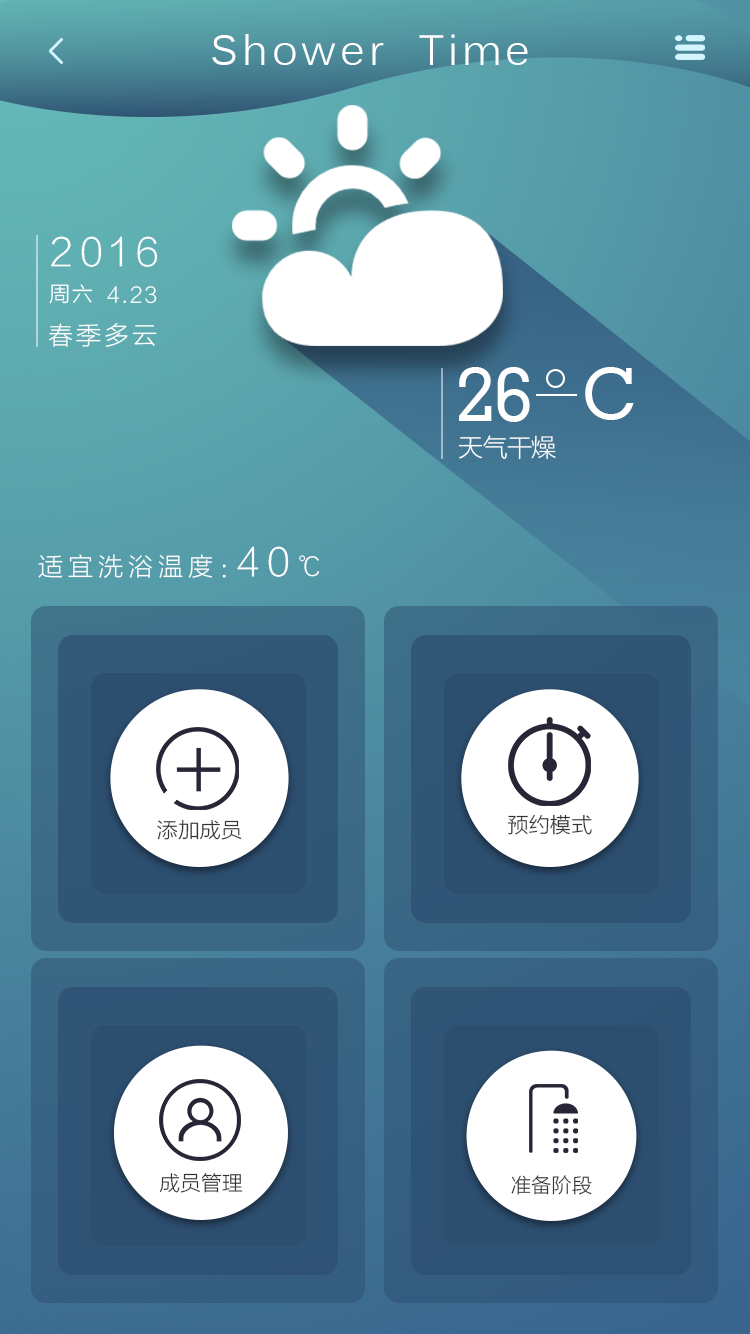
<style>
.page{position:relative;width:750px;height:1334px}
.page>*{position:absolute;margin:0}
.t1{font:41.7px "Kalinga";letter-spacing:0.1em;color:#ffffff}
.t2{font:37.5px "FZLTXHJW--GB1-0";letter-spacing:0.2em;color:#ffffff}
.t3{font:20.8px "FZLTXHJW--GB1-0";letter-spacing:0.1em;color:#ffffff}
.t4{font:25px "FZLTXHJW--GB1-0";letter-spacing:-0.08em;color:#ffffff}
.t5{font:75px "GeometricSlab703BT-Medium";letter-spacing:-0.025em;color:#ffffff}
.t6{font:70.8px "GeometricSlab703BT-Medium";letter-spacing:-0.025em;color:#ffffff}
.t7{font:25px "FZLTXHJW--GB1-0";letter-spacing:-0.025em;color:#ffffff}
.t8{font:25px "FZLTXHJW--GB1-0";letter-spacing:0.2em;color:#ffffff}
.t9{font:20.8px "FZLTXHJW--GB1-0";letter-spacing:0.024em;color:#343434}
.t10{font:20.4px "FZLTXHJW--GB1-0";letter-spacing:0.024em;color:#343434}
.t11{font:19.9px "FZLTXHJW--GB1-0";letter-spacing:0.024em;color:#343434}
</style>
<div class="page">
<p class="t1" style="left:212px;top:34px;width:316px;height:31px">Shower  Time</p>
<p class="t2" style="left:51px;top:236px;width:107px;height:31px">2016</p>
<p class="t3" style="left:49px;top:284px;width:44px;height:20px">周六</p>
<p class="t3" style="left:107px;top:286px;width:50px;height:18px">4.23</p>
<p class="t4" style="left:49px;top:323px;width:108px;height:24px">春 季 多 云</p>
<p class="t5" style="left:459px;top:367px;width:71px;height:55px">26</p>
<p class="t6" style="left:585px;top:367px;width:49px;height:53px">C</p>
<p class="t7" style="left:458px;top:435px;width:98px;height:25px">天气干燥</p>
<p class="t8" style="left:38px;top:554px;width:188px;height:24px">适宜洗浴温度：</p>
<p class="t2" style="left:237px;top:546px;width:83px;height:31px">40<span class="t8">℃</span></p>
<p class="t9" style="left:157px;top:819px;width:85px;height:21px">添加成员</p>
<p class="t9" style="left:507px;top:814px;width:85px;height:21px">预约模式</p>
<p class="t10" style="left:159px;top:1173px;width:84px;height:20px">成员管理</p>
<p class="t11" style="left:511px;top:1175px;width:81px;height:20px">准备阶段</p>
</div>
